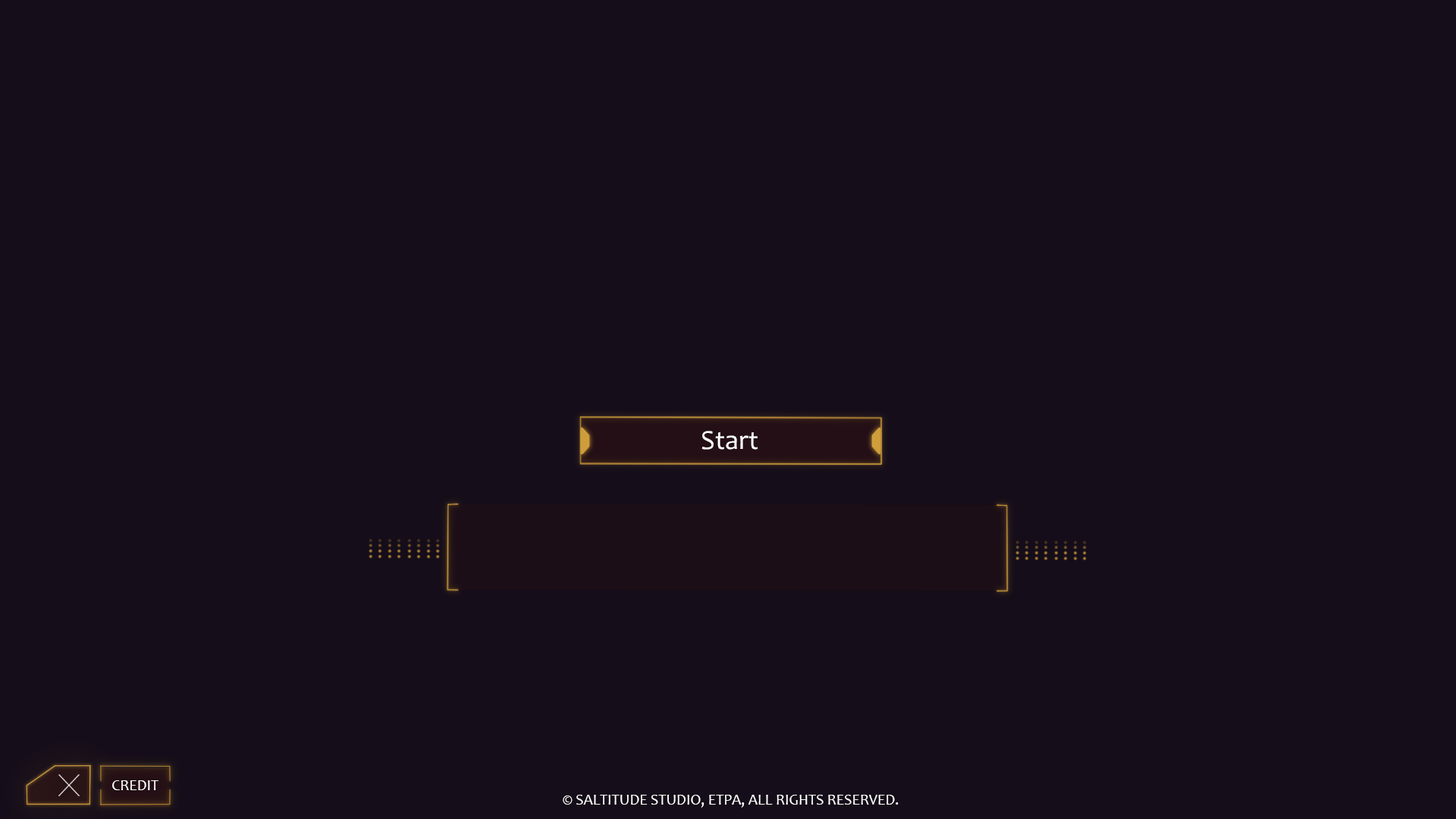
<style>
.page{position:relative;width:1456px;height:819px;background:#150d19}
.page>*{position:absolute;margin:0}
.t1{font:27.6px "Candara";color:#ffffff}
.t2{font:15.2px "Candara";color:#ffffff}
</style>
<div class="page">
<p class="t1" style="left:701px;top:431px;width:57px;height:19px">Start</p>
<p class="t2" style="left:112px;top:780px;width:46px;height:10px">CREDIT</p>
<p class="t2" style="left:563px;top:795px;width:336px;height:13px">© SALTITUDE STUDIO, ETPA, ALL RIGHTS RESERVED.</p>
</div>
